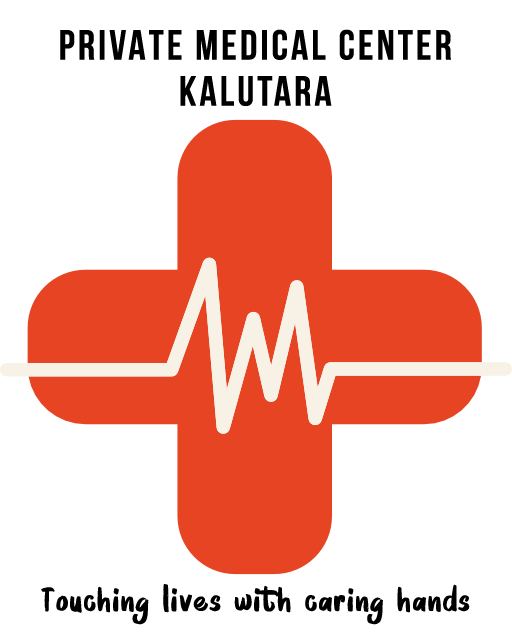
<style>
.page{position:relative;width:512px;height:644px;background:#ffffff}
.page>*{position:absolute;margin:0}
.t1{font:42px/46px "BebasNeueBold";letter-spacing:0.072em;color:#000000}
.t2{font:29.2px "BRUSHMOSHDemo";letter-spacing:0.06em;color:#000000}
</style>
<div class="page">
<p class="t1" style="left:60px;top:29px;width:391px;height:77px;text-align:center">PRIVATE MEDICAL CENTER<br>KALUTARA</p>
<p class="t2" style="left:41px;top:584px;width:429px;height:41px">Touching lives with caring hands</p>
</div>
